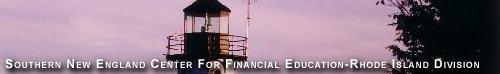
<style>
.page{position:relative;width:500px;height:74px}
.page>*{position:absolute;margin:0}
.t1{font:12px "Arial-BoldMT";letter-spacing:0.1em;color:#ffffff;font-variant:small-caps}
</style>
<div class="page">
<p class="t1" style="left:5px;top:59px;width:474px;height:10px">Southern New England Center For Financial Education-Rhode Island Division</p>
</div>
